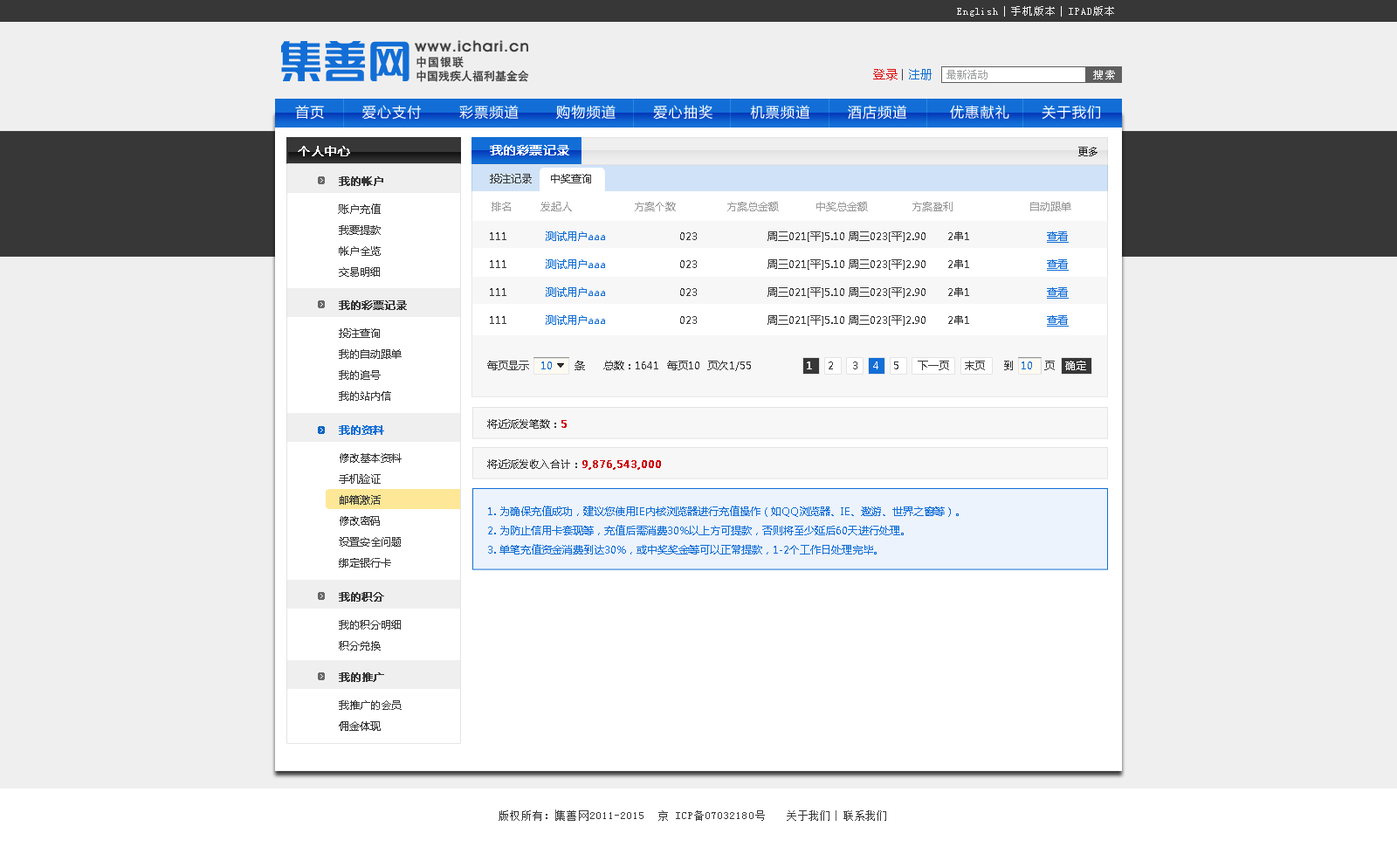
<style>
.page{position:relative;width:1397px;height:854px;background:#f0efef}
.page>*{position:absolute;margin:0}
.t1{font:10.5px "SimSun";letter-spacing:0.09em;color:#f0efef}
.t2{font:10.5px "SimSun";letter-spacing:0.07em;color:#f0efef}
.t3{font:11.3px "HeitiCSEG-Medium-GB";letter-spacing:0.08em;color:#373738}
.t4{font:11.3px "HeitiCSEG-Medium-GB";color:#373738}
.t5{font:12.2px "FZLTXHK--GBK1-0";letter-spacing:0.01em;color:#dd0a0d}
.t6{font:11.3px "FZLTXHK--GBK1-0";letter-spacing:0.01em;color:#434344}
.t7{font:12.2px "FZLTXHK--GBK1-0";letter-spacing:0.01em;color:#126ed6}
.t8{font:10.5px "SimSun";color:#9fa0a0}
.t9{font:10.5px "SimSun";letter-spacing:0.16em;color:#ffffff}
.t10{font:14px "MicrosoftYaHei";letter-spacing:0.08em;color:#ffffff}
.t11{font:12.2px "MicrosoftYaHei";color:#ffffff;font-weight:bold}
.t12{font:12.2px "MicrosoftYaHei";letter-spacing:0.01em;color:#ffffff;font-weight:bold}
.t13{font:10.5px "MicrosoftYaHei";letter-spacing:0.01em}
.t14{font:10.5px "MicrosoftYaHei";letter-spacing:0.01em;color:#373738}
.t15{font:10.5px "MicrosoftYaHei";color:#373738;font-weight:bold}
.t16{font:10.5px/21px "MicrosoftYaHei";color:#373738}
.t17{font:10.5px "MicrosoftYaHei";letter-spacing:0.01em;color:#9b9b9b}
.t18{font:10.5px "MicrosoftYaHei";color:#373738}
.t19{font:10.5px "MicrosoftYaHei";color:#126ed6}
.t20{font:10.5px "MicrosoftYaHei";color:#126ed6;text-decoration:underline}
.t21{font:10.5px "MicrosoftYaHei";letter-spacing:0.01em;color:#126ed6}
.t22{font:10.5px "MicrosoftYaHei";letter-spacing:0.01em;color:#ffffff;font-weight:bold}
.t23{font:10.5px "MicrosoftYaHei";letter-spacing:0.01em;color:#ffffff}
.t24{font:10.5px "MicrosoftYaHei";color:#126ed6;font-weight:bold}
.t25{font:10.5px "MicrosoftYaHei";color:#cd0406;font-weight:bold}
.t26{font:10.5px/19.2px "MicrosoftYaHei";color:#126ed6}
.t27{font:10.5px "SimSun";letter-spacing:0.09em;color:#373738}
.t28{font:10.5px "SimSun";letter-spacing:0.07em;color:#373738}
</style>
<div class="page">
<p class="t1" style="left:957px;top:6px;width:157px;height:11px"><span class="t2">English  </span>手机版本  IPAD版本</p>
<p class="t3" style="left:416px;top:56px;width:48px;height:12px">中国银联</p>
<p class="t4" style="left:416px;top:70px;width:113px;height:12px">中国残疾人福利基金会</p>
<p class="t5" style="left:873px;top:69px;width:58px;height:11px">登录 <span class="t6">| </span><span class="t7">注册</span></p>
<p class="t8" style="left:946px;top:70px;width:41px;height:9px">最新活动</p>
<p class="t9" style="left:1093px;top:70px;width:22px;height:9px">搜索</p>
<p class="t10" style="left:295px;top:105px;width:805px;height:15px">首页       爱心支付       彩票频道       购物频道       爱心抽奖       机票频道       酒店频道        优惠献礼      关于我们</p>
<p class="t11" style="left:298px;top:146px;width:52px;height:10px">个人中心</p>
<p class="t12" style="left:490px;top:145px;width:79px;height:10px">我的彩票记录</p>
<p class="t13" style="left:1078px;top:147px;width:19px;height:9px">更多</p>
<p class="t14" style="left:490px;top:174px;width:101px;height:9px">投注记录     中奖查询</p>
<p class="t15" style="left:339px;top:176px;width:44px;height:10px">我的帐户</p>
<p class="t16" style="left:338px;top:203px;width:43px;height:74px">账户充值<br>我要提款 <br>帐户全览 <br>交易明细</p>
<p class="t17" style="left:491px;top:202px;width:580px;height:9px">排名        发起人                 方案个数              方案总金额          中奖总金额            方案盈利                     自动跟单</p>
<p class="t18" style="left:490px;top:231px;width:578px;height:12px">111           <span class="t19">测试用户aaa </span>                    023                    周三021[平]5.10 周三023[平]2.90      2串1                      <span class="t20">查看</span></p>
<p class="t18" style="left:490px;top:259px;width:578px;height:12px">111           <span class="t19">测试用户aaa </span>                    023                    周三021[平]5.10 周三023[平]2.90      2串1                      <span class="t20">查看</span></p>
<p class="t18" style="left:490px;top:287px;width:578px;height:12px">111           <span class="t19">测试用户aaa </span>                    023                    周三021[平]5.10 周三023[平]2.90      2串1                      <span class="t20">查看</span></p>
<p class="t15" style="left:339px;top:300px;width:68px;height:10px">我的彩票记录</p>
<p class="t18" style="left:490px;top:315px;width:578px;height:11px">111           <span class="t19">测试用户aaa </span>                    023                    周三021[平]5.10 周三023[平]2.90      2串1                      <span class="t20">查看</span></p>
<p class="t16" style="left:339px;top:328px;width:63px;height:73px">投注查询<br>我的自动跟单<br>我的追号<br>我的站内信</p>
<p class="t14" style="left:487px;top:361px;width:599px;height:10px">每页显示   <span class="t21">10</span>      条     总数：1641  每页10  页次1/55               <span class="t22">1 </span>   2     3   <span class="t23"> 4</span>    5     下一页    末页     到  <span class="t21">10 </span>  页   <span class="t23">确定</span></p>
<p class="t24" style="left:339px;top:425px;width:45px;height:10px">我的资料</p>
<p class="t18" style="left:487px;top:419px;width:80px;height:10px">将近派发笔数：<span class="t25">5</span></p>
<p class="t16" style="left:339px;top:453px;width:63px;height:114px">修改基本资料<br>手机验证<br>邮箱激活<br>修改密码<br>设置安全问题<br>绑定银行卡</p>
<p class="t25" style="left:487px;top:459px;width:174px;height:11px"><span class="t18">将近派发收入合计：</span>9,876,543,000</p>
<p class="t26" style="left:488px;top:505px;width:470px;height:49px">1. 为确保充值成功，建议您使用IE内核浏览器进行充值操作（如QQ浏览器、IE、遨游、世界之窗等）。<br>2. 为防止信用卡套现等，充值后需消费30%以上方可提款，否则将至少延后60天进行处理。<br>3. 单笔充值资金消费到达30%，或中奖奖金等可以正常提款，1-2个工作日处理完毕。</p>
<p class="t15" style="left:339px;top:592px;width:45px;height:9px">我的积分</p>
<p class="t16" style="left:339px;top:620px;width:62px;height:30px">我的积分明细<br>积分兑换</p>
<p class="t15" style="left:339px;top:672px;width:45px;height:10px">我的推广</p>
<p class="t16" style="left:339px;top:700px;width:63px;height:31px">我推广的会员<br>佣金体现</p>
<p class="t27" style="left:498px;top:810px;width:267px;height:11px">版权所有：集善网2011-2015  京 ICP备07032180号</p>
<p class="t28" style="left:787px;top:810px;width:99px;height:11px">关于我们  联系我们</p>
</div>
